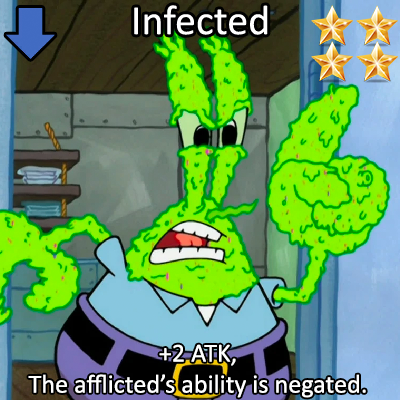
<style>
.page{position:relative;width:400px;height:400px}
.page>*{position:absolute;margin:0}
.t1{font:72px "Calibri";color:#ffffff}
.t2{font:45px/31px "Calibri";color:#ffffff}
</style>
<div class="page">
<p class="t1" style="left:134px;top:5px;width:134px;height:30px">Infected</p>
<p class="t2" style="left:28px;top:344px;width:338px;height:54px;text-align:center">+2 ATK,<br>The afflicted’s ability is negated.</p>
</div>
